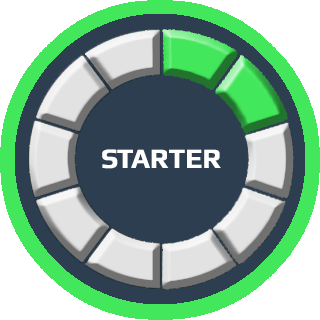
<style>
.page{position:relative;width:320px;height:320px;background:#2c3e50}
.page>*{position:absolute;margin:0}
.t1{font:28px "Play-Bold";color:#ffffff}
</style>
<div class="page">
<p class="t1" style="left:102px;top:149px;width:119px;height:20px">STARTER</p>
</div>
